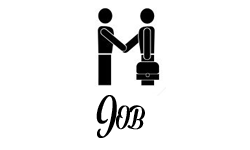
<style>
.page{position:relative;width:250px;height:150px;background:#ffffff}
.page>*{position:absolute;margin:0}
.t1{font:48px "Mission-Script";letter-spacing:-0.05em;color:#000000;font-variant:small-caps}
</style>
<div class="page">
<p class="t1" style="left:96px;top:95px;width:49px;height:43px">Job</p>
</div>
